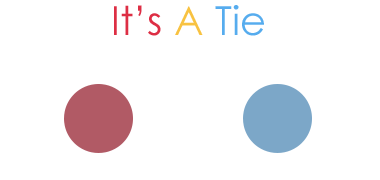
<style>
.page{position:relative;width:380px;height:180px;background:#ffffff}
.page>*{position:absolute;margin:0}
.t1{font:40px "CenturyGothic";color:#dd2e44}
.t2{font:40px "CenturyGothic";color:#f8c241}
.t3{font:40px "CenturyGothic";color:#56acee}
</style>
<div class="page">
<p class="t1" style="left:114px;top:5px;width:150px;height:31px">It’s <span class="t2">A</span><span class="t3"> Tie</span></p>
</div>
